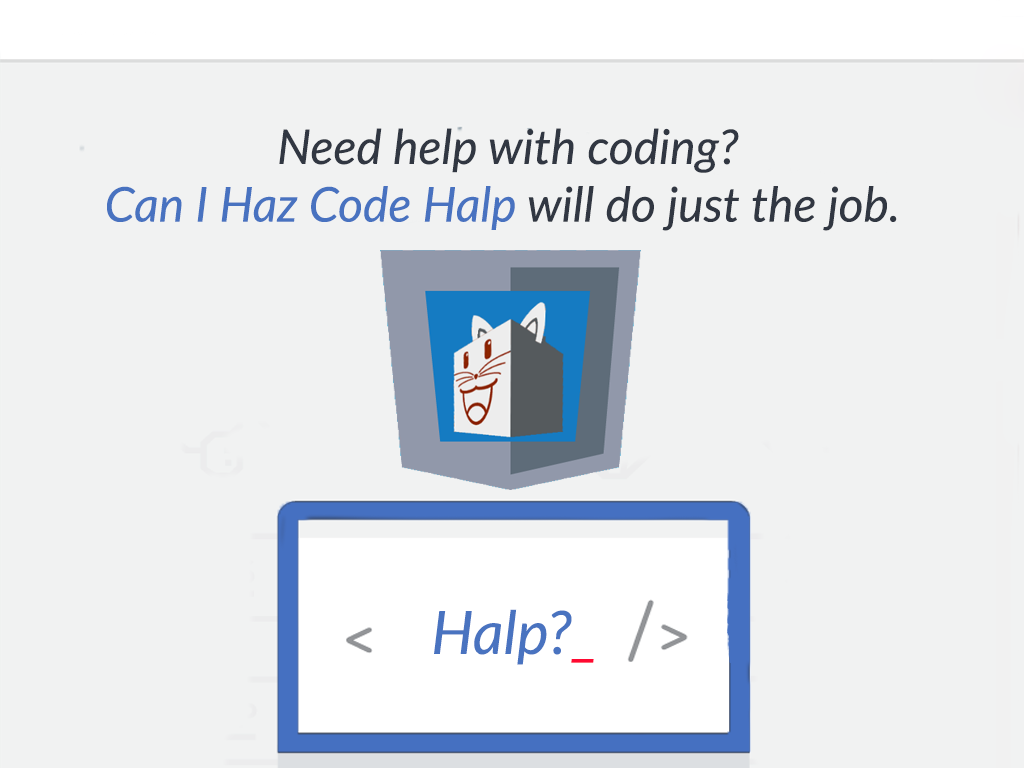
<style>
.page{position:relative;width:1024px;height:768px;background:#f1f2f2}
.page>*{position:absolute;margin:0}
.t1{font:48px "Lato-Italic";color:#313742}
.t2{font:48px "Lato-Italic";color:#4872c0}
.t3{font:60px "Lato-Italic";color:#4973c0}
.t4{font:60px "Lato-Italic";color:#ff0932}
</style>
<div class="page">
<p class="t1" style="left:107px;top:128px;width:790px;height:103px;text-align:center">Need help with coding?<br><span class="t2">Can I Haz Code Halp</span> will do just the job.</p>
<p class="t3" style="left:434px;top:609px;width:160px;height:56px">Halp?<span class="t4">_</span></p>
</div>
